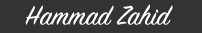
<style>
.page{position:relative;width:202px;height:33px;background:#333333}
.page>*{position:absolute;margin:0}
.t1{font:30px "SignPainter-HouseScript";color:#ffffff}
</style>
<div class="page">
<p class="t1" style="left:25px;top:4px;width:148px;height:21px">Hammad Zahid Zahid</p>
</div>
